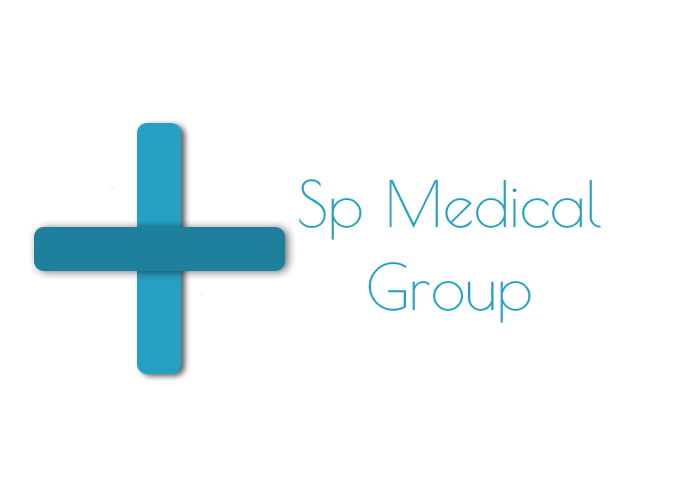
<style>
.page{position:relative;width:700px;height:500px;background:#ffffff}
.page>*{position:absolute;margin:0}
.t1{font:62.5px/83.3px "PoiretOne-Regular";color:#25a0c2}
</style>
<div class="page">
<p class="t1" style="left:299px;top:179px;width:302px;height:144px;text-align:center">Sp Medical<br>Group</p>
</div>
